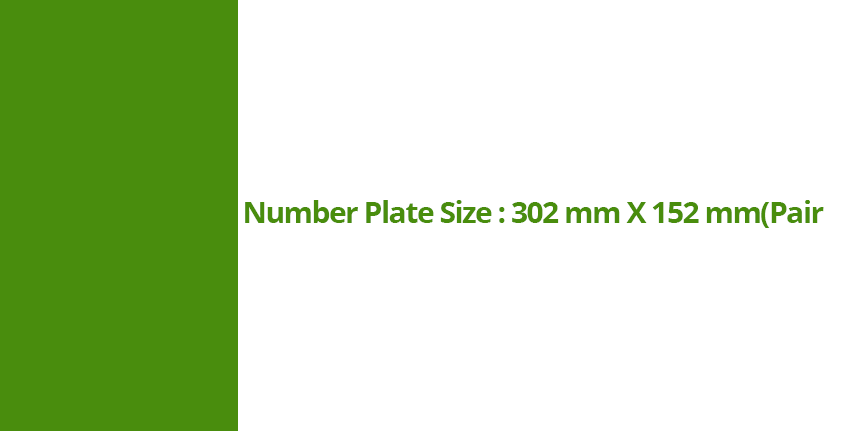
<style>
.page{position:relative;width:856px;height:431px;background:#ffffff}
.page>*{position:absolute;margin:0}
.t1{font:30px "OpenSans-Bold";letter-spacing:-0.05em;color:#498d0d}
</style>
<div class="page">
<p class="t1" style="left:32px;top:200px;width:792px;height:30px">Existing Punjab Number Plate Size : 302 mm X 152 mm(Pair</p>
</div>
